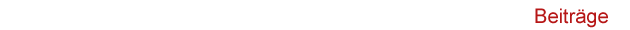
<style>
.page{position:relative;width:630px;height:30px;background:#ffffff}
.page>*{position:absolute;margin:0}
.t1{font:20px "ArialMT";color:#b61717}
.t2{font:18px "ArialMT";color:#b61717}
</style>
<div class="page">
<p class="t1" style="left:535px;top:8px;width:73px;height:20px"><span class="t2">                                                    </span>Beiträge</p>
</div>
